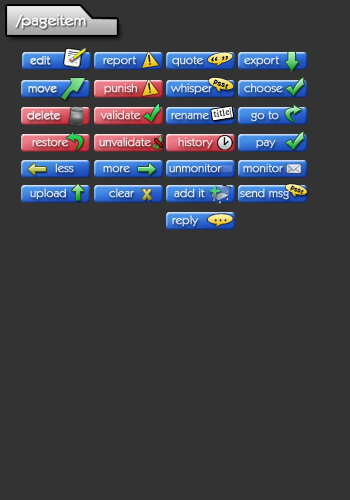
<style>
.page{position:relative;width:350px;height:500px;background:#333333}
.page>*{position:absolute;margin:0}
.t1{font:15px "KabelITCbyBT-Book";color:#ffffff;font-weight:bold;scale:1.09 1}
.t2{font:14px "KabelITCbyBT-Book";color:#000000;scale:1.5 1}
.t3{font:12px "KabelITCbyBT-Book";color:#d8e6f8;font-weight:bold}
.t4{font:12px "KabelITCbyBT-Book";color:#d7e4f8;font-weight:bold}
.t5{font:12px "KabelITCbyBT-Book";color:#d8e5f8;font-weight:bold}
.t6{font:12px "KabelITCbyBT-Book";color:#d7e4f7;font-weight:bold}
.t7{font:12px "KabelITCbyBT-Book";color:#f9e0e2;font-weight:bold}
.t8{font:12px "KabelITCbyBT-Book";color:#d6e2f6;font-weight:bold}
.t9{font:8.6px "20thCenturyFont";color:#000000}
.t10{font:12px "KabelITCbyBT-Book";color:#f9e1e4;font-weight:bold}
.t11{font:12px "KabelITCbyBT-Book";color:#f8e0e2;font-weight:bold}
.t12{font:9.9px "TimesNewRomanPSMT";letter-spacing:0.025em;color:#333333;font-weight:bold;scale:0.9 1}
.t13{font:12px "KabelITCbyBT-Book";color:#d7e5f8;font-weight:bold}
.t14{font:12px "KabelITCbyBT-Book";color:#f8dfe1;font-weight:bold}
.t15{font:12px "KabelITCbyBT-Book";color:#f8dfe2;font-weight:bold}
.t16{font:7.6px "20thCenturyFont";color:#110f08}
.t17{font:12px "KabelITCbyBT-Book";color:#d6e3f7;font-weight:bold}
.t18{font:14px "KabelITCbyBT-Demi";font-weight:bold}
.t19{font:12px "KabelITCbyBT-Book";color:#d8e4f7;font-weight:bold}
.t20{font:19px "KabelITCbyBT-Book";color:#424242;font-weight:bold}
</style>
<div class="page">
<p class="t1" style="left:15px;top:15px;width:71px;height:14px">/pageitem</p>
<p class="t2" style="left:148px;top:54px;width:3px;height:11px;rotate:-8deg">!</p>
<p class="t3" style="left:30px;top:56px;width:21px;height:9px">edit</p>
<p class="t4" style="left:103px;top:56px;width:33px;height:11px">report</p>
<p class="t5" style="left:172px;top:56px;width:31px;height:11px">quote</p>
<p class="t5" style="left:244px;top:56px;width:35px;height:11px">export</p>
<p class="t6" style="left:28px;top:86px;width:29px;height:7px">move</p>
<p class="t7" style="left:104px;top:83px;width:33px;height:12px">punish</p>
<p class="t2" style="left:148px;top:82px;width:3px;height:11px;rotate:-8deg">!</p>
<p class="t8" style="left:170px;top:83px;width:43px;height:12px">whisper</p>
<p class="t9" style="left:213px;top:79px;width:16px;height:10px;rotate:22deg">psst</p>
<p class="t6" style="left:244px;top:83px;width:39px;height:10px">choose</p>
<p class="t10" style="left:27px;top:111px;width:33px;height:9px">delete</p>
<p class="t11" style="left:100px;top:110px;width:41px;height:10px">validate</p>
<p class="t4" style="left:171px;top:113px;width:38px;height:7px">rename</p>
<p class="t12" style="left:213px;top:108px;width:19px;height:10px;rotate:-9deg">title|</p>
<p class="t13" style="left:251px;top:111px;width:28px;height:11px">go to</p>
<p class="t14" style="left:99px;top:137px;width:52px;height:10px">unvalidate</p>
<p class="t15" style="left:178px;top:137px;width:35px;height:12px">history</p>
<p class="t15" style="left:32px;top:138px;width:36px;height:9px">restore</p>
<p class="t6" style="left:256px;top:140px;width:20px;height:9px">pay</p>
<p class="t8" style="left:55px;top:163px;width:19px;height:10px">less</p>
<p class="t5" style="left:103px;top:166px;width:27px;height:7px">more</p>
<p class="t6" style="left:169px;top:163px;width:53px;height:10px">unmonitor</p>
<p class="t5" style="left:243px;top:163px;width:40px;height:10px">monitor</p>
<p class="t16" style="left:290px;top:185px;width:14px;height:9px;rotate:23deg">psst</p>
<p class="t17" style="left:30px;top:188px;width:36px;height:12px">upload</p>
<p class="t6" style="left:109px;top:188px;width:25px;height:10px">clear</p>
<p class="t18" style="left:142px;top:189px;width:10px;height:11px">X</p>
<p class="t5" style="left:174px;top:188px;width:31px;height:10px">add it</p>
<p class="t19" style="left:240px;top:188px;width:49px;height:12px">send msg</p>
<p class="t5" style="left:172px;top:215px;width:27px;height:12px">reply</p>
<p class="t20" style="left:214px;top:219px;width:13px;height:3px">...</p>
</div>
